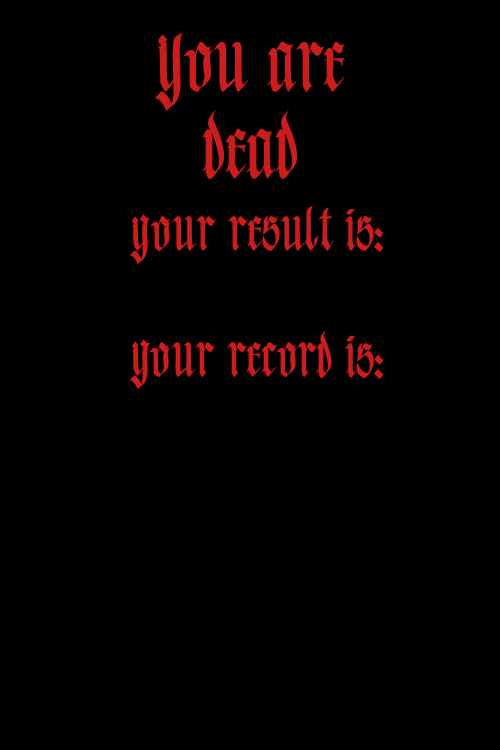
<style>
.page{position:relative;width:500px;height:750px;background:#000000}
.page>*{position:absolute;margin:0}
.t1{font:72px "Blacktonespersonaluse";color:#ca1e1e}
.t2{font:50px "Blacktonespersonaluse";color:#ca1e1e}
</style>
<div class="page">
<p class="t1" style="left:155px;top:32px;width:189px;height:147px;text-align:center">You are<br>dead</p>
<p class="t2" style="left:129px;top:206px;width:255px;height:59px">your result is:</p>
<p class="t2" style="left:129px;top:330px;width:255px;height:60px"><span class="t1">        </span> your record is:</p>
</div>
